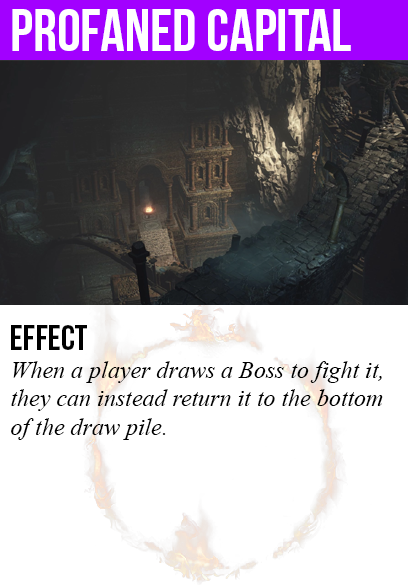
<style>
.page{position:relative;width:408px;height:585px;background:#ffffff}
.page>*{position:absolute;margin:0}
.t1{font:60px "BebasNeue";color:#ffffff}
.t2{font:36px "BebasNeue";color:#000000}
.t3{font:24px "TimesNewRomanPS-ItalicMT";color:#000000}
</style>
<div class="page">
<p class="t1" style="left:12px;top:9px;width:339px;height:42px">profaned capital</p>
<p class="t2" style="left:11px;top:325px;width:76px;height:25px">Effect</p>
<p class="t3" style="left:11px;top:361px;width:372px;height:79px">When a player draws a Boss to fight it,<br>they can instead return it to the bottom<br>of the draw pile.</p>
</div>
